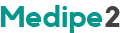
<style>
.page{position:relative;width:120px;height:33px;background:#ffffff}
.page>*{position:absolute;margin:0}
.t1{font:30px "Kollektif-Bold";color:#05978e}
.t2{font:30px "Kollektif-Bold";color:#424242}
</style>
<div class="page">
<p class="t1" style="left:0px;top:5px;width:120px;height:28px">Medipe<span class="t2">2</span></p>
</div>
